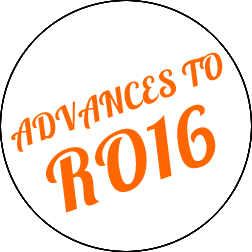
<style>
.page{position:relative;width:252px;height:252px;background:#ffffff}
.page>*{position:absolute;margin:0}
.t1{font:35px "Lobster";letter-spacing:0.025em;color:#ff6600}
.t2{font:80px "Lobster";letter-spacing:0.025em;color:#ff6600}
</style>
<div class="page">
<p class="t1" style="left:11px;top:52px;width:212px;height:100px;rotate:-19deg">ADVANCES TO</p>
<p class="t2" style="left:46px;top:104px;width:170px;height:109px;rotate:-19deg">RO16</p>
</div>
